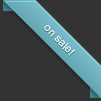
<style>
.page{position:relative;width:101px;height:101px;background:#333333}
.page>*{position:absolute;margin:0}
.t1{font:11px "ArialMT";color:#ffffff}
</style>
<div class="page">
<p class="t1" style="left:44px;top:25px;width:31px;height:31px;rotate:46deg">on sale!</p>
</div>
